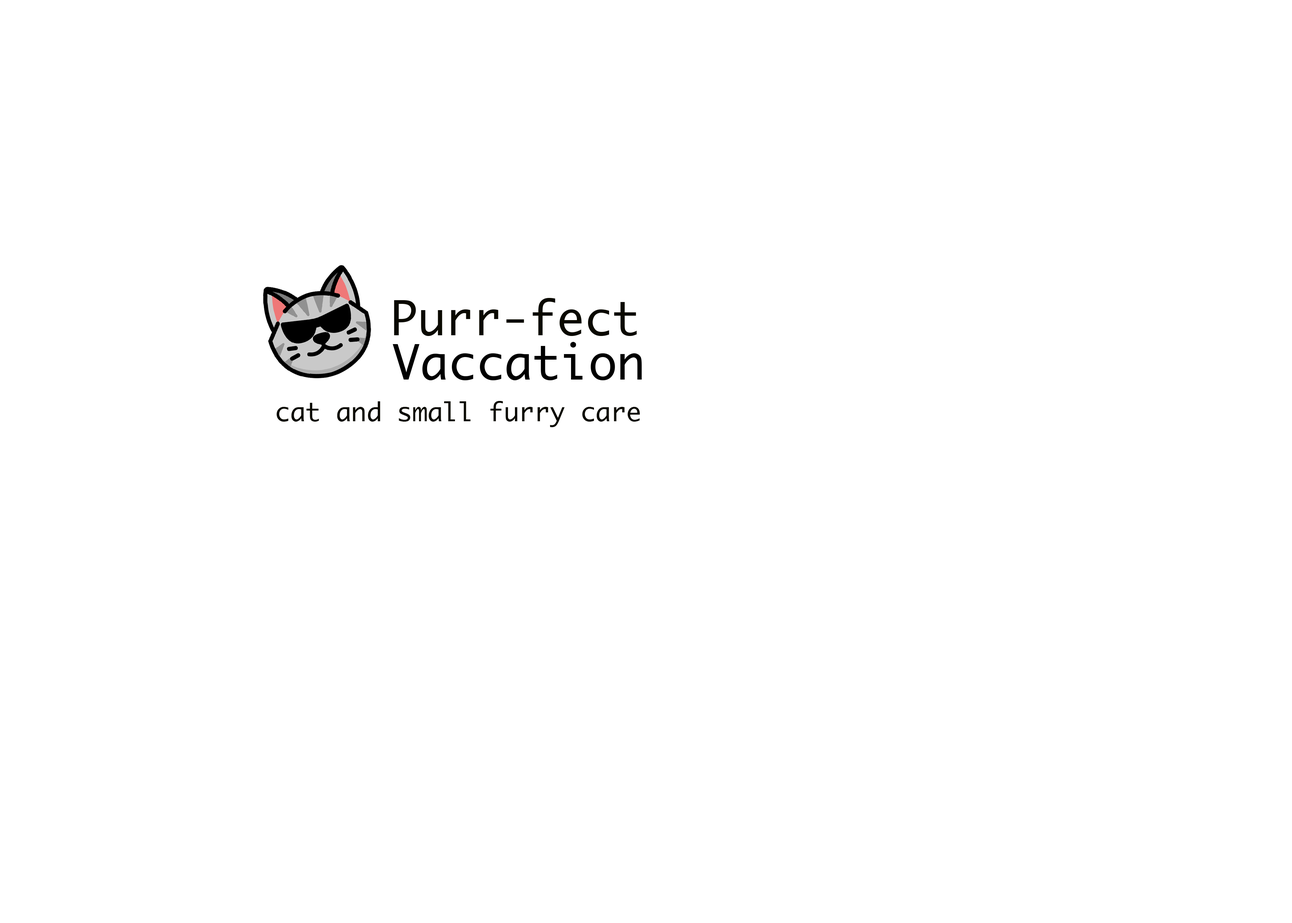
<style>
.page{position:relative;width:1292px;height:923px;background:#ffffff}
.page>*{position:absolute;margin:0}
.t1{font:46.2px "Ayuthaya";color:#0a0900}
.t2{font:46.8px "Ayuthaya";color:#000000}
.t3{font:25.5px "Ayuthaya";color:#0a0900}
</style>
<div class="page">
<p class="t1" style="left:394px;top:298px;width:243px;height:38px">Purr-fect</p>
<p class="t2" style="left:393px;top:342px;width:249px;height:38px">Vaccation</p>
<p class="t3" style="left:276px;top:401px;width:364px;height:26px">cat and small furry care</p>
</div>
